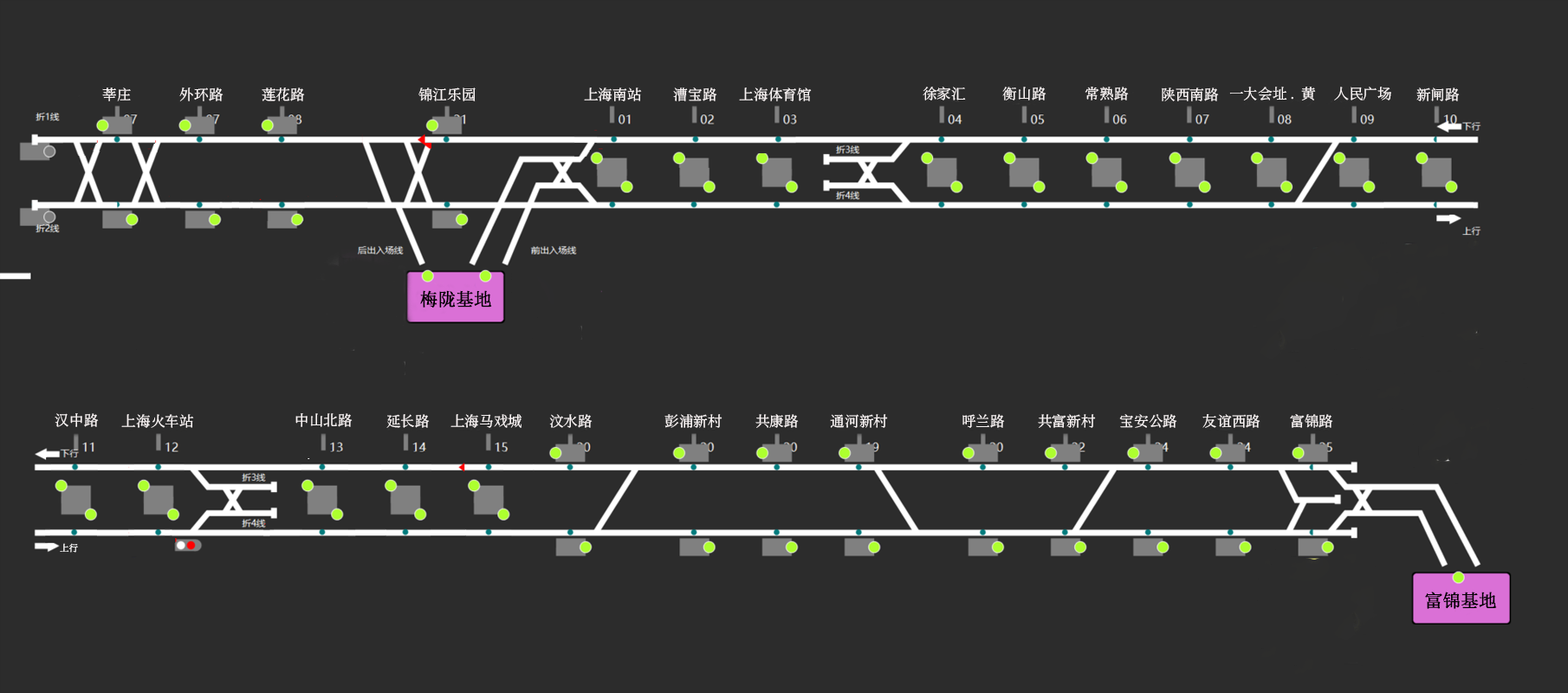
<style>
.page{position:relative;width:1568px;height:693px;background:#2c2c2c}
.page>*{position:absolute;margin:0}
.t1{font:14.4px "SimSong-Regular";color:#f9f4f4}
.t2{font:18px "SimSong-Bold";color:#000000}
.t3{font:9px "SimSong-Bold";color:#fefefe}
</style>
<div class="page">
<p class="t1" style="left:102px;top:87px;width:29px;height:14px">莘庄</p>
<p class="t1" style="left:179px;top:87px;width:45px;height:14px">外环路</p>
<p class="t1" style="left:262px;top:87px;width:43px;height:14px">莲花路</p>
<p class="t1" style="left:418px;top:87px;width:58px;height:14px">锦江乐园</p>
<p class="t1" style="left:584px;top:87px;width:58px;height:14px">上海南站</p>
<p class="t1" style="left:673px;top:87px;width:44px;height:14px">漕宝路</p>
<p class="t1" style="left:739px;top:87px;width:73px;height:14px">上海体育馆</p>
<p class="t1" style="left:923px;top:87px;width:43px;height:13px">徐家汇</p>
<p class="t1" style="left:1002px;top:87px;width:44px;height:13px">衡山路</p>
<p class="t1" style="left:1085px;top:87px;width:44px;height:13px">常熟路</p>
<p class="t1" style="left:1162px;top:87px;width:57px;height:14px">陕西南路</p>
<p class="t1" style="left:1229px;top:87px;width:87px;height:13px">一大会址.黄</p>
<p class="t1" style="left:1334px;top:87px;width:57px;height:13px">人民广场</p>
<p class="t1" style="left:1416px;top:87px;width:44px;height:14px">新闸路</p>
<p class="t2" style="left:420px;top:290px;width:72px;height:18px">梅陇基地</p>
<p class="t1" style="left:55px;top:413px;width:44px;height:14px">汉中路</p>
<p class="t1" style="left:295px;top:413px;width:58px;height:14px">中山北路</p>
<p class="t1" style="left:121px;top:414px;width:73px;height:14px">上海火车站</p>
<p class="t1" style="left:386px;top:414px;width:44px;height:14px">延长路</p>
<p class="t1" style="left:450px;top:414px;width:72px;height:14px">上海马戏城</p>
<p class="t1" style="left:549px;top:414px;width:44px;height:14px">汶水路</p>
<p class="t1" style="left:664px;top:414px;width:58px;height:14px">彭浦新村</p>
<p class="t1" style="left:755px;top:414px;width:44px;height:14px">共康路</p>
<p class="t1" style="left:830px;top:414px;width:58px;height:14px">通河新村</p>
<p class="t1" style="left:962px;top:414px;width:43px;height:14px">呼兰路</p>
<p class="t1" style="left:1038px;top:414px;width:58px;height:14px">共富新村</p>
<p class="t1" style="left:1119px;top:414px;width:58px;height:14px">宝安公路</p>
<p class="t1" style="left:1202px;top:414px;width:58px;height:14px">友谊西路</p>
<p class="t1" style="left:1290px;top:414px;width:43px;height:14px">富锦路</p>
<p class="t3" style="left:60px;top:543px;width:18px;height:10px">上行</p>
<p class="t2" style="left:1425px;top:592px;width:72px;height:17px">富锦基地</p>
</div>
